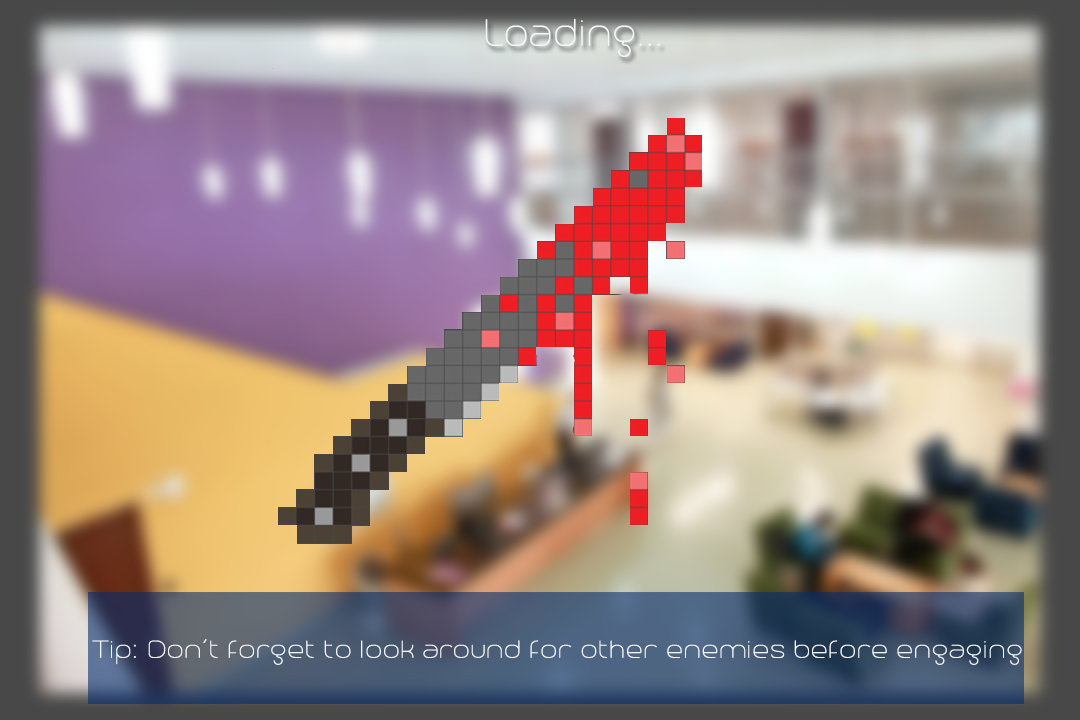
<style>
.page{position:relative;width:1080px;height:720px}
.page>*{position:absolute;margin:0}
.t1{font:48px "Trench-Thin";color:#f5f7f9}
.t2{font:30.8px "Trench-Thin";color:#f5f7f9;scale:1.09 1}
</style>
<div class="page">
<p class="t1" style="left:485px;top:18px;width:176px;height:39px">Loading...</p>
<p class="t2" style="left:92px;top:639px;width:930px;height:26px">Tip: Don’t forget to look around for other enemies before engaging</p>
</div>
